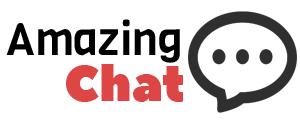
<style>
.page{position:relative;width:300px;height:122px;background:#ffffff}
.page>*{position:absolute;margin:0}
.t1{font:45px "Viga-Regular";color:#000000}
.t2{font:50px "PeaceSans";color:#de4646}
</style>
<div class="page">
<p class="t1" style="left:6px;top:19px;width:174px;height:44px">Amazing</p>
<p class="t2" style="left:66px;top:64px;width:117px;height:38px">Chat</p>
</div>
